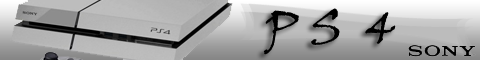
<style>
.page{position:relative;width:480px;height:60px}
.page>*{position:absolute;margin:0}
.t1{font:48px "VinerHandITC";color:#000000}
</style>
<div class="page">
<p class="t1" style="left:263px;top:8px;width:133px;height:47px;rotate:-1deg">P S  4</p>
</div>
